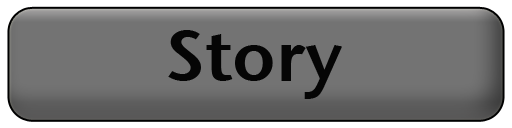
<style>
.page{position:relative;width:512px;height:128px;background:#737373}
.page>*{position:absolute;margin:0}
.t1{font:72px "StoneSansSemOSITCTTSemi";color:#050505}
</style>
<div class="page">
<p class="t1" style="left:168px;top:30px;width:174px;height:69px">Story</p>
</div>
